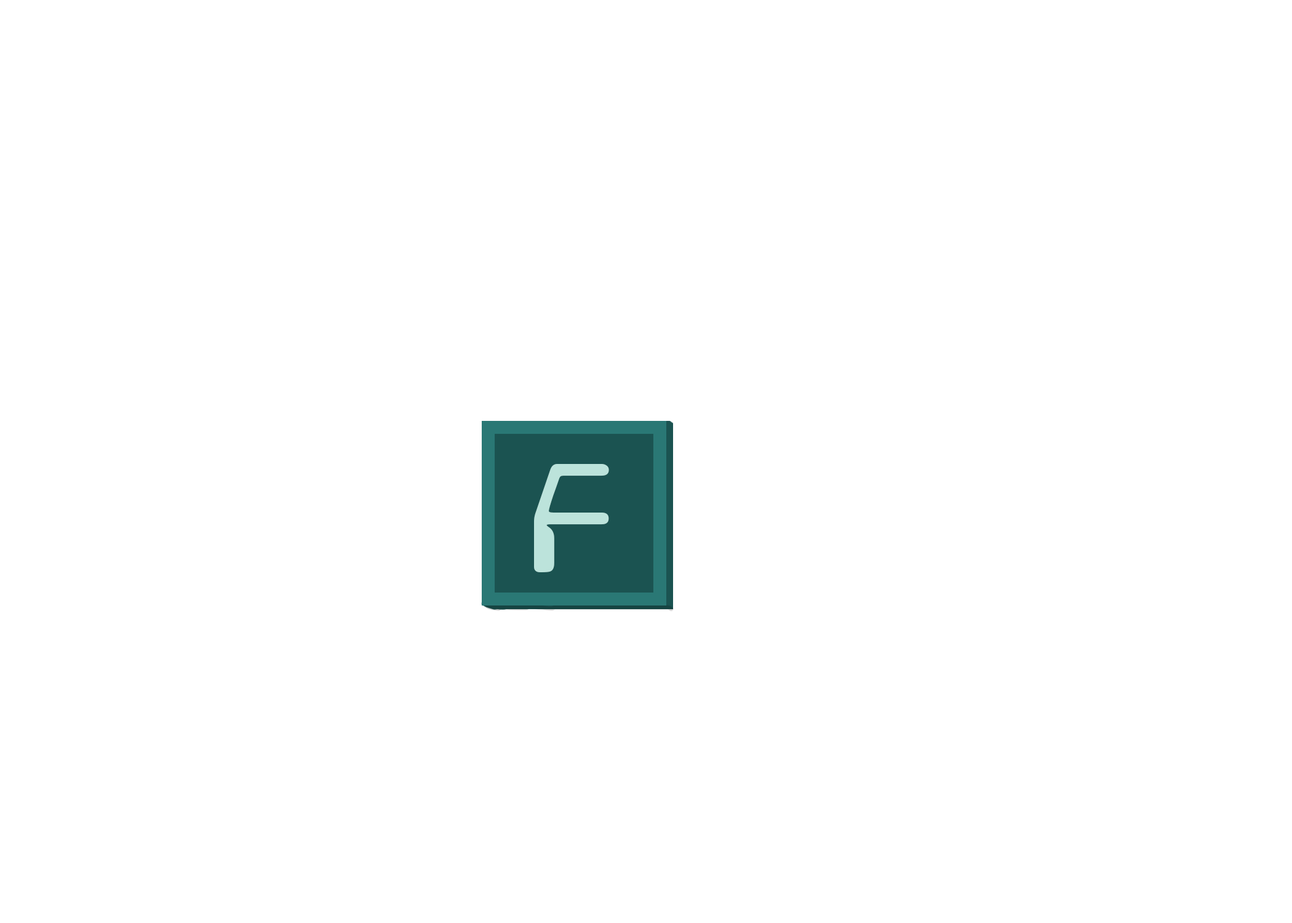
<style>
.page{position:relative;width:1292px;height:923px;background:#ffffff}
.page>*{position:absolute;margin:0}
.t1{font:153.8px "DestructoBeamBB";color:#bce3db}
</style>
<div class="page">
<p class="t1" style="left:534px;top:464px;width:75px;height:108px">f</p>
</div>
